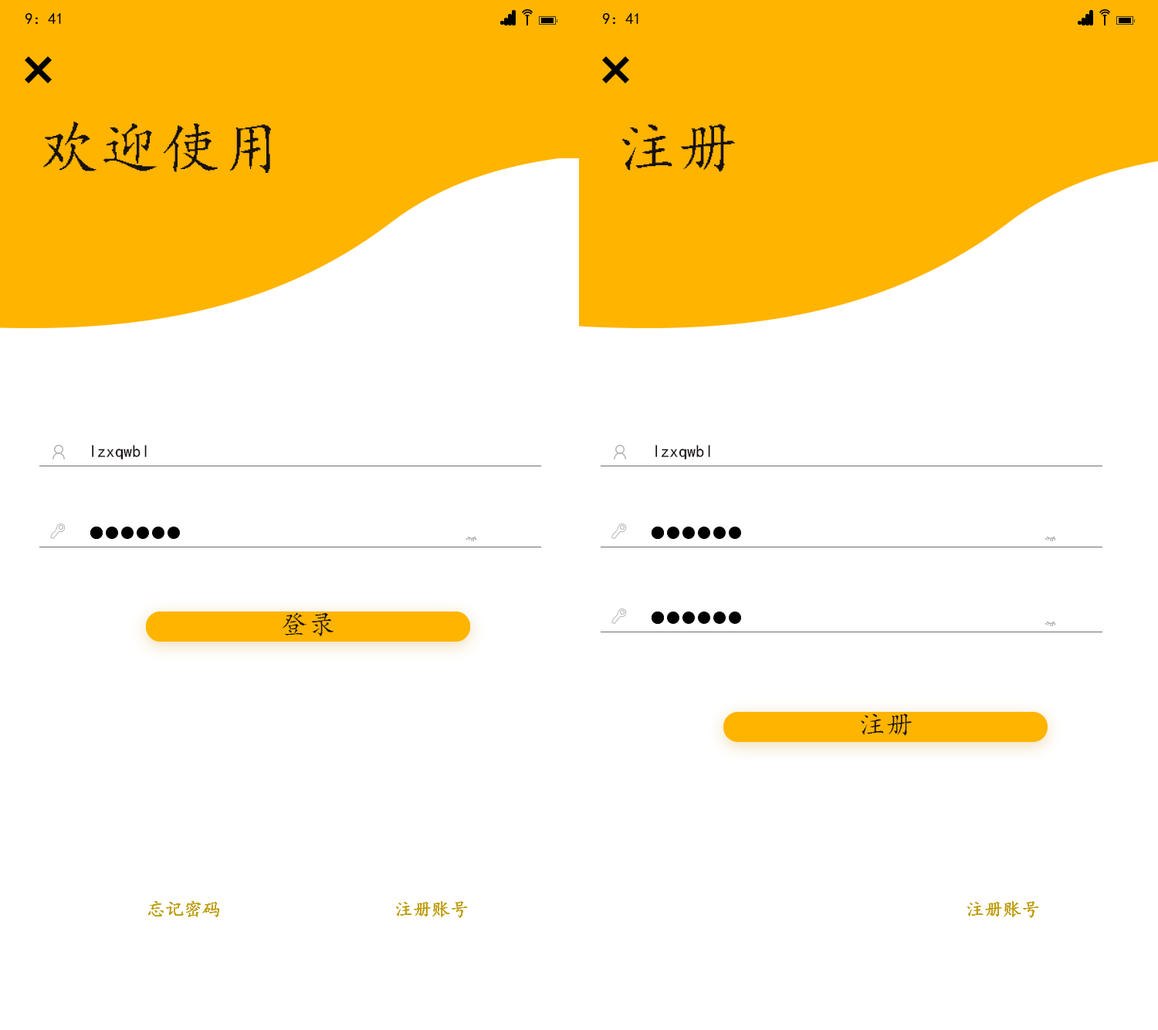
<style>
.page{position:relative;width:1158px;height:1030px;background:#ffffff}
.page>*{position:absolute;margin:0}
.t1{font:15.3px "¿¬Ìå";color:#000000}
.t2{font:60.7px "¿¬Ìå";color:#171212}
.t3{font:17.5px "¿¬Ìå";color:#171212}
.t4{font:27.5px "¿¬Ìå";color:#171212}
.t5{font:18.3px "¿¬Ìå";color:#c0a008}
</style>
<div class="page">
<p class="t1" style="left:25px;top:13px;width:36px;height:11px">9：41</p>
<p class="t1" style="left:602px;top:13px;width:36px;height:11px">9：41</p>
<p class="t2" style="left:43px;top:121px;width:228px;height:52px">欢迎使用</p>
<p class="t2" style="left:622px;top:124px;width:113px;height:48px">注册</p>
<p class="t3" style="left:92px;top:445px;width:55px;height:14px">lzxqwbl</p>
<p class="t3" style="left:655px;top:445px;width:55px;height:14px">lzxqwbl</p>
<p class="t4" style="left:282px;top:612px;width:52px;height:24px;rotate:180deg">登录</p>
<p class="t4" style="left:861px;top:713px;width:51px;height:23px;rotate:180deg">注册</p>
<p class="t5" style="left:148px;top:901px;width:71px;height:16px">忘记密码</p>
<p class="t5" style="left:148px;top:901px;width:71px;height:16px">忘记密码</p>
<p class="t5" style="left:148px;top:901px;width:71px;height:16px">忘记密码</p>
<p class="t5" style="left:148px;top:901px;width:71px;height:16px">忘记密码</p>
<p class="t5" style="left:148px;top:901px;width:71px;height:16px">忘记密码</p>
<p class="t5" style="left:396px;top:901px;width:72px;height:17px">注册账号</p>
<p class="t5" style="left:396px;top:901px;width:72px;height:17px">注册账号</p>
<p class="t5" style="left:396px;top:901px;width:72px;height:17px">注册账号</p>
<p class="t5" style="left:396px;top:901px;width:72px;height:17px">注册账号</p>
<p class="t5" style="left:396px;top:901px;width:72px;height:17px">注册账号</p>
<p class="t5" style="left:967px;top:901px;width:72px;height:17px">注册账号</p>
<p class="t5" style="left:967px;top:901px;width:72px;height:17px">注册账号</p>
<p class="t5" style="left:967px;top:901px;width:72px;height:17px">注册账号</p>
<p class="t5" style="left:967px;top:901px;width:72px;height:17px">注册账号</p>
<p class="t5" style="left:967px;top:901px;width:72px;height:17px">注册账号</p>
</div>
